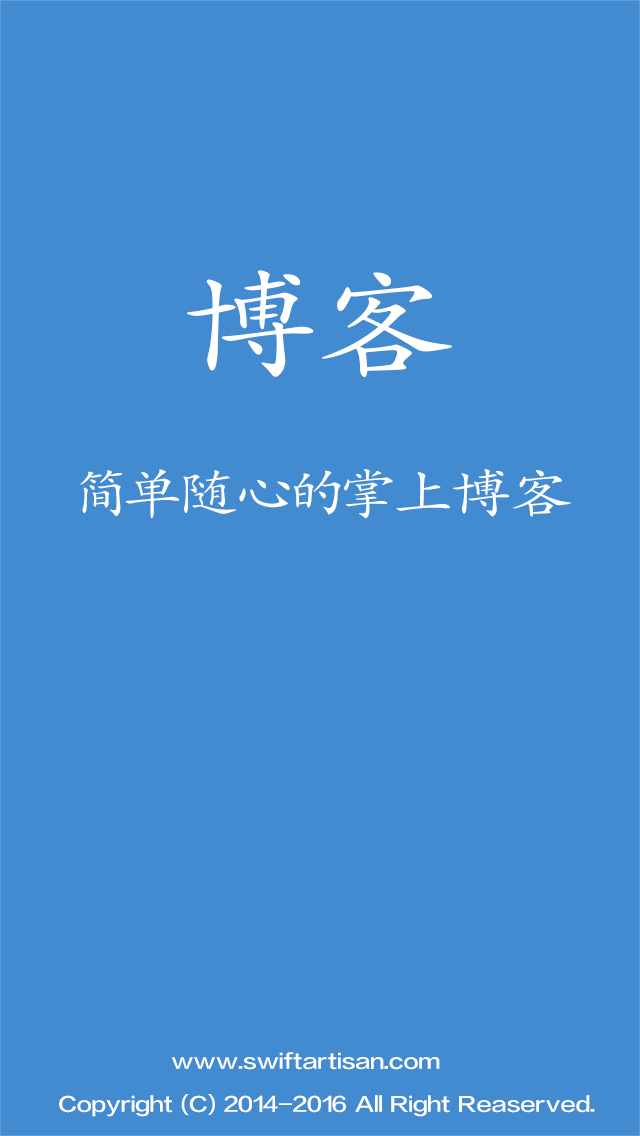
<style>
.page{position:relative;width:640px;height:1136px;background:#428bd1}
.page>*{position:absolute;margin:0}
.t1{font:119.9px "STKaiti";letter-spacing:0.06em;color:#ffffff;scale:1.17 1}
.t2{font:53.3px "STKaiti";letter-spacing:0.06em;color:#ffffff;scale:1.17 1}
.t3{font:20px "FZLTZHK--GBK1-0";letter-spacing:0.06em;color:#ffffff;scale:1.17 1}
</style>
<div class="page">
<p class="t1" style="left:187px;top:270px;width:265px;height:107px">博客</p>
<p class="t2" style="left:80px;top:469px;width:491px;height:50px">简单随心的掌上博客</p>
<p class="t3" style="left:171px;top:1052px;width:269px;height:18px">www.swiftartisan.com</p>
<p class="t3" style="left:59px;top:1094px;width:536px;height:23px">Copyright (C) 2014-2016 All Right Reaserved.</p>
</div>
